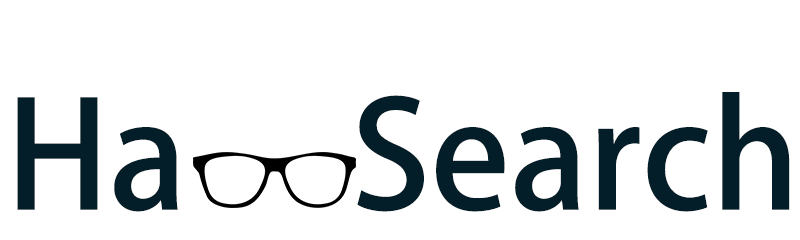
<style>
.page{position:relative;width:800px;height:240px;background:#ffffff}
.page>*{position:absolute;margin:0}
.t1{font:146.7px "AdobeHeitiStd-Regular";color:#031e28}
</style>
<div class="page">
<p class="t1" style="left:17px;top:92px;width:773px;height:120px">Ha     Search</p>
</div>
